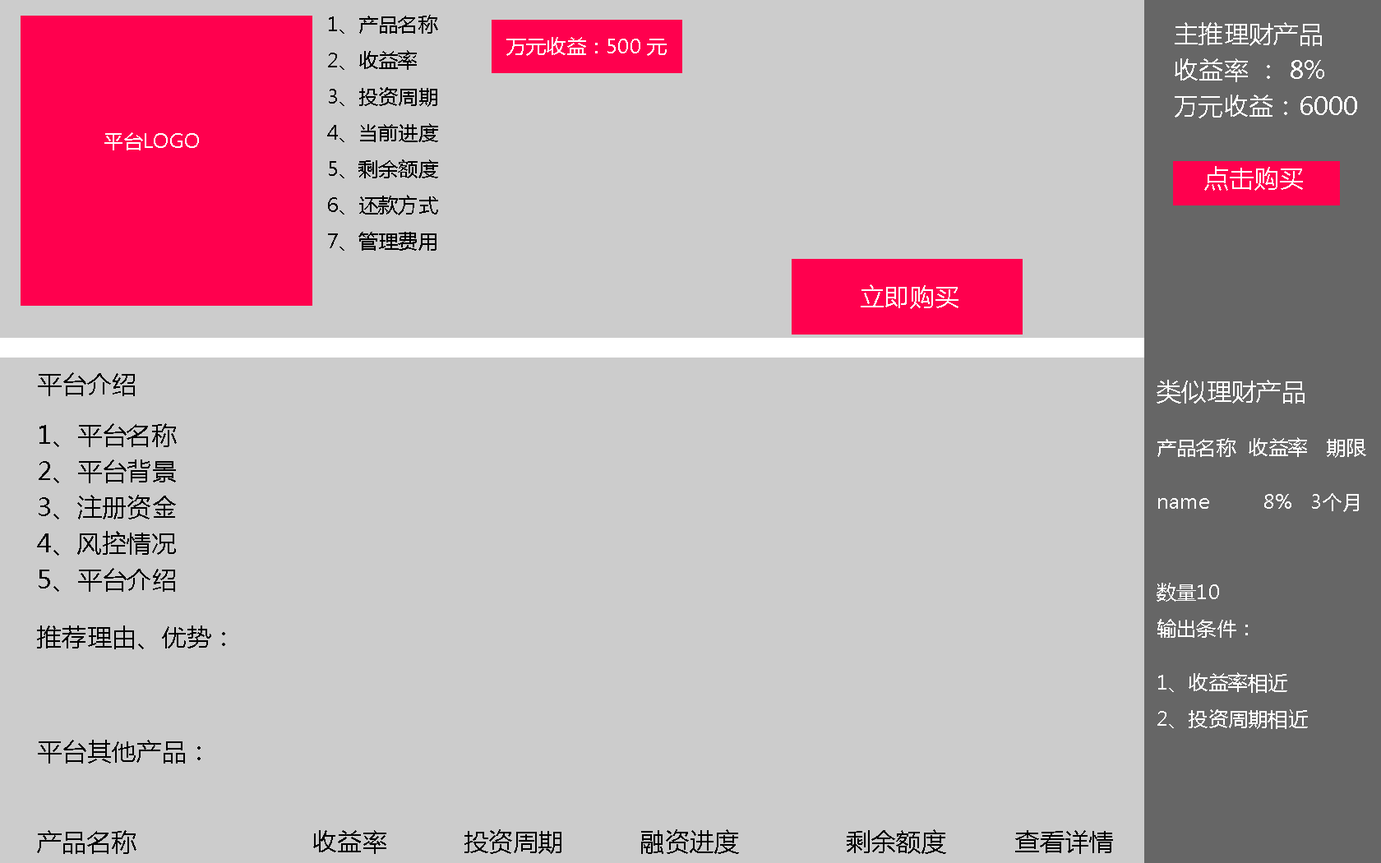
<style>
.page{position:relative;width:1381px;height:863px;background:#cccccc}
.page>*{position:absolute;margin:0}
.t1{font:19.7px/18.1px "MicrosoftYaHei";letter-spacing:0.01em;color:#000000}
.t2{font:24.7px/18.1px "MicrosoftYaHei";letter-spacing:0.01em;color:#ffffff}
.t3{font:19.7px "MicrosoftYaHei";letter-spacing:0.01em;color:#ffffff}
.t4{font:24.7px "MicrosoftYaHei";letter-spacing:0.01em;color:#ffffff}
.t5{font:24.7px "MicrosoftYaHei";letter-spacing:0.01em;color:#000000}
.t6{font:19.7px/18.1px "MicrosoftYaHei";letter-spacing:0.01em;color:#ffffff}
.t7{font:24.7px/18.1px "MicrosoftYaHei";letter-spacing:0.01em;color:#000000}
</style>
<div class="page">
<p class="t1" style="left:327px;top:15px;width:111px;height:236px">1、产品名称<br><br>2、收益率<br><br>3、投资周期<br><br>4、当前进度<br><br>5、剩余额度<br><br>6、还款方式<br><br>7、管理费用</p>
<p class="t2" style="left:1175px;top:22px;width:182px;height:169px">主推理财产品<br><br>收益率 ： 8%<br><br>万元收益：6000<br><br><br><br>    点击购买</p>
<p class="t3" style="left:506px;top:37px;width:161px;height:19px">万元收益：500 元</p>
<p class="t3" style="left:104px;top:132px;width:95px;height:18px">平台LOGO</p>
<p class="t4" style="left:861px;top:284px;width:98px;height:25px">立即购买</p>
<p class="t5" style="left:38px;top:372px;width:97px;height:24px">平台介绍</p>
<p class="t6" style="left:1157px;top:380px;width:209px;height:349px"><span class="t2">类似理财产品<br><br><br></span>产品名称  收益率   期限<br><br><br>name         8%   3个月 <br><br><br><br><br>数量10  <br><br>输出条件： <br><br><br>1、收益率相近<br><br>2、投资周期相近</p>
<p class="t7" style="left:37px;top:423px;width:140px;height:169px">1、平台名称<br><br>2、平台背景<br><br>3、注册资金<br><br>4、风控情况<br><br>5、平台介绍</p>
<p class="t5" style="left:37px;top:626px;width:188px;height:24px">推荐理由、优势：</p>
<p class="t7" style="left:37px;top:740px;width:1076px;height:114px">平台其他产品：<br><br><br><br><br>产品名称                       收益率          投资周期          融资进度              剩余额度         查看详情</p>
</div>
